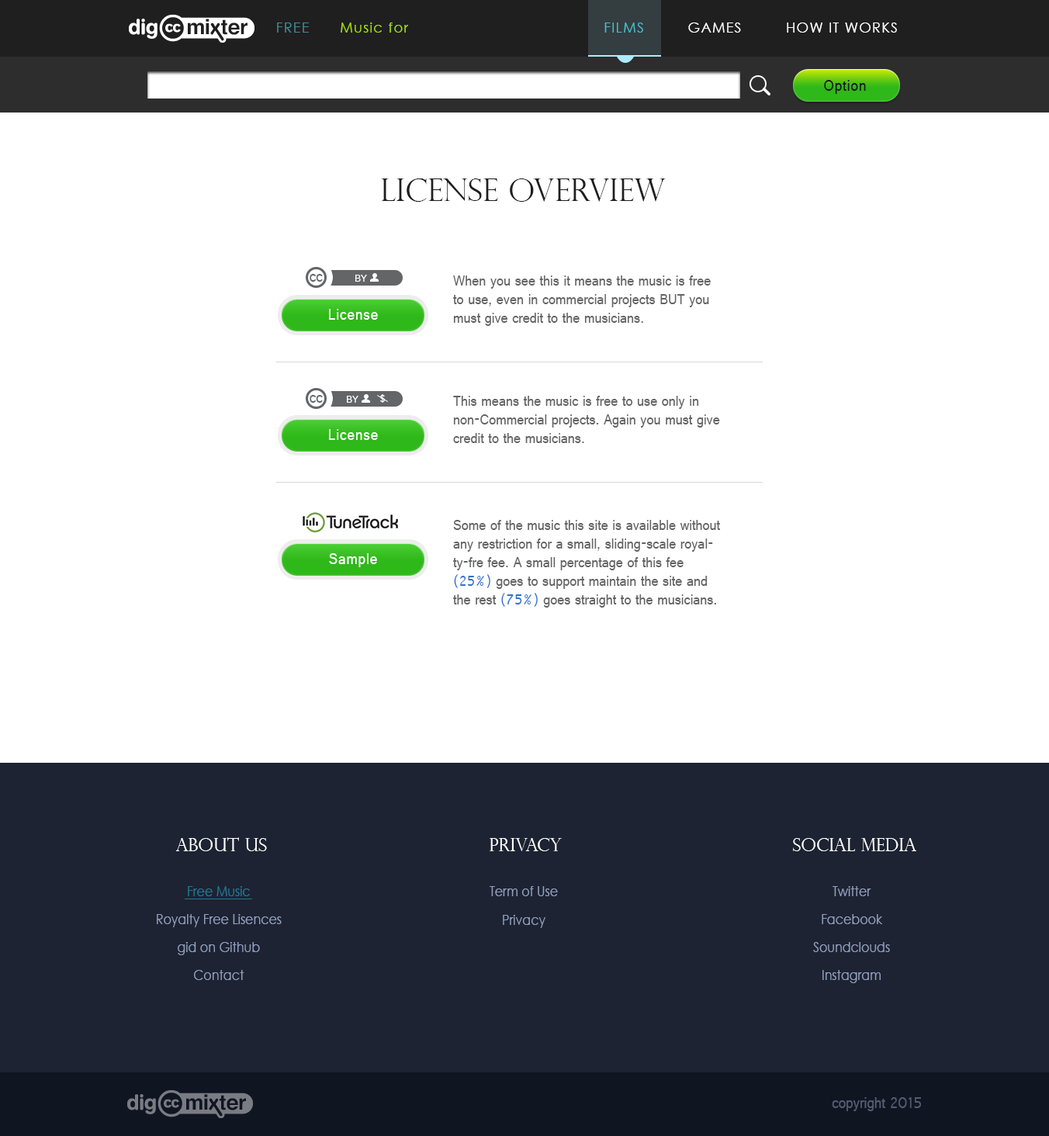
<style>
.page{position:relative;width:1049px;height:1136px;background:#ffffff}
.page>*{position:absolute;margin:0}
.t1{font:14px "CenturyGothic";letter-spacing:0.075em;color:#3d8c9b}
.t2{font:14px "CenturyGothic";letter-spacing:0.075em;color:#a1dd0c}
.t3{font:14px "CenturyGothic";letter-spacing:0.075em;color:#45bdce}
.t4{font:14px "CenturyGothic";letter-spacing:0.075em;color:#ffffff}
.t5{font:16.3px "Raavi";letter-spacing:0.05em;color:#171719;scale:0.9 1}
.t6{font:31.2px "PerpetuaTitlingMT-Light";color:#1f1f1f}
.t7{font:16.3px "Raavi";color:#636567;scale:0.9 1}
.t8{font:10.6px "Raavi";color:#ffffff;scale:0.92 1}
.t9{font:15.5px "Raavi";color:#646464;scale:0.9 1}
.t10{font:16.3px "Raavi";letter-spacing:0.05em;color:#ffffff;scale:0.9 1}
.t11{font:15.5px "Raavi";color:#3271c7;scale:0.9 1}
.t12{font:18.1px "PerpetuaTitlingMT-Light";color:#ffffff}
.t13{font:13.9px/28px "CenturyGothic";color:#929fbf;scale:0.89 1}
.t14{font:13.9px/28px "CenturyGothic";color:#227895;scale:0.89 1}
.t15{font:16.3px "Raavi";color:#545c71;scale:0.89 1}
</style>
<div class="page">
<p class="t1" style="left:277px;top:23px;width:32px;height:10px">FREE</p>
<p class="t2" style="left:341px;top:23px;width:68px;height:10px">Music for</p>
<p class="t3" style="left:605px;top:23px;width:38px;height:10px">FILMS</p>
<p class="t4" style="left:688px;top:23px;width:53px;height:10px">GAMES</p>
<p class="t4" style="left:787px;top:23px;width:110px;height:10px">HOW IT WORKS</p>
<p class="t5" style="left:824px;top:80px;width:42px;height:14px">Option</p>
<p class="t6" style="left:381px;top:179px;width:285px;height:23px">LICENSE OVERVIEW</p>
<p class="t7" style="left:310px;top:274px;width:13px;height:8px">cc</p>
<p class="t8" style="left:355px;top:275px;width:12px;height:7px">BY</p>
<p class="t9" style="left:453px;top:276px;width:258px;height:50px">When you see this it means the music is free to use, even in commercial projects BUT you must give credit to the musicians.</p>
<p class="t10" style="left:329px;top:309px;width:49px;height:11px">License</p>
<p class="t7" style="left:310px;top:395px;width:13px;height:8px">cc</p>
<p class="t8" style="left:347px;top:396px;width:12px;height:7px">BY</p>
<p class="t8" style="left:380px;top:394px;width:5px;height:9px">$</p>
<p class="t9" style="left:453px;top:396px;width:267px;height:47px">This means the music is free to use only in non-Commercial projects. Again you must give credit to the musicians.</p>
<p class="t10" style="left:329px;top:429px;width:49px;height:11px">License</p>
<p class="t9" style="left:453px;top:520px;width:267px;height:88px">Some of the music this site is available without any restriction for a small, sliding-scale royalty-fre fee. A small percentage of this fee <span class="t11">(25%)</span> goes to support maintain the site and the rest <span class="t11">(75%)</span> goes straight to the musicians.</p>
<p class="t10" style="left:329px;top:553px;width:48px;height:14px">Sample</p>
<p class="t12" style="left:175px;top:837px;width:92px;height:14px">ABout us</p>
<p class="t12" style="left:490px;top:838px;width:72px;height:13px">Privacy</p>
<p class="t12" style="left:793px;top:838px;width:124px;height:13px">SOCIAL MEDIA</p>
<p class="t13" style="left:157px;top:886px;width:125px;height:94px;text-align:center"><span class="t14">Free Music<br></span>Royalty Free Lisences<br>gid on Github<br>Contact</p>
<p class="t13" style="left:490px;top:886px;width:68px;height:42px;text-align:center">Term of Use<br>Privacy</p>
<p class="t13" style="left:813px;top:886px;width:77px;height:97px;text-align:center">Twitter<br>Facebook<br>Soundclouds<br>Instagram</p>
<p class="t15" style="left:832px;top:1098px;width:89px;height:13px">copyright 2015</p>
</div>
